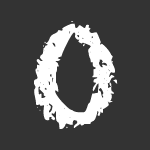
<style>
.page{position:relative;width:150px;height:150px;background:#333333}
.page>*{position:absolute;margin:0}
.t1{font:130px "Chalkduster";color:#ffffff}
</style>
<div class="page">
<p class="t1" style="left:34px;top:21px;width:84px;height:108px">O</p>
</div>
